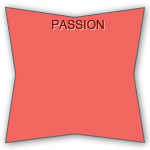
<style>
.page{position:relative;width:150px;height:150px;background:#f26761}
.page>*{position:absolute;margin:0}
.t1{font:12px "ArialMT";color:#710f0b}
</style>
<div class="page">
<p class="t1" style="left:52px;top:20px;width:52px;height:9px">PASSION</p>
</div>
